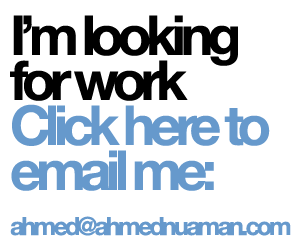
<style>
.page{position:relative;width:300px;height:250px;background:#ffffff}
.page>*{position:absolute;margin:0}
.t1{font:25px/45px "HelveticaNeue-Bold";letter-spacing:-0.11em;color:#6699cc}
.t2{font:55px/45px "HelveticaNeue-Bold";letter-spacing:-0.11em;color:#000000}
.t3{font:55px/45px "HelveticaNeue-Bold";letter-spacing:-0.09em;color:#000000}
.t4{font:55px/45px "HelveticaNeue-Bold";letter-spacing:-0.11em;color:#6699cc}
.t5{font:55px/45px "HelveticaNeue-Bold";letter-spacing:-0.09em;color:#6699cc}
</style>
<div class="page">
<p class="t1" style="left:10px;top:15px;width:281px;height:221px"><span class="t2">I’m look</span><span class="t3">i</span><span class="t2">ng<br>for work<br></span><span class="t4">C</span><span class="t5">l</span><span class="t4">ick here to<br>ema</span><span class="t5">i</span><span class="t4">l me:<br></span>ahmed@ahmednuaman.com</p>
</div>
